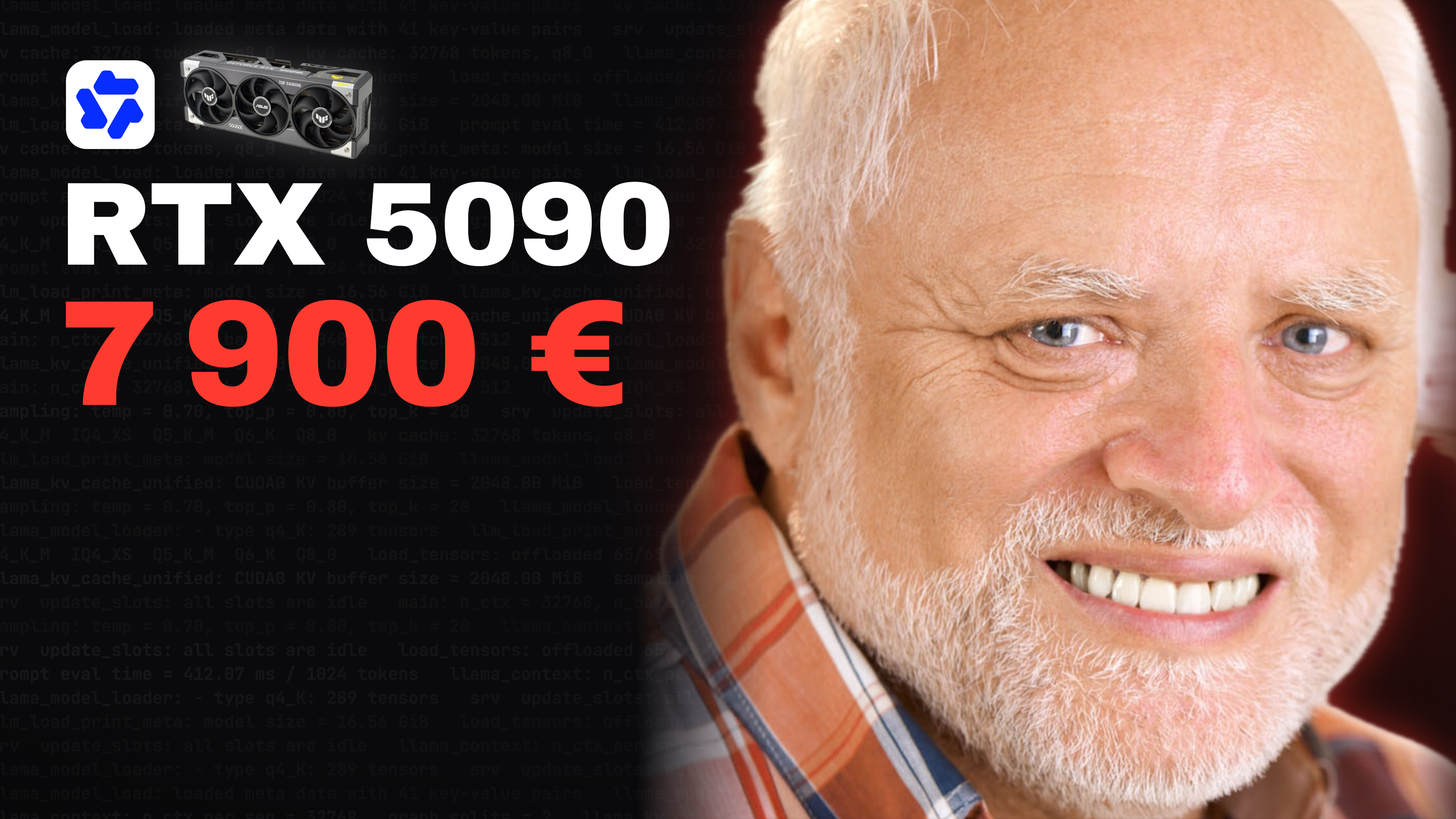
<style>
.page{position:relative;width:1456px;height:819px;background:#0a0a0c}
.page>*{position:absolute;margin:0}
.t1{font:118.3px "ArchivoBlack-Regular";letter-spacing:-0.01em;color:#ffffff}
.t2{font:150.1px "ArchivoBlack-Regular";letter-spacing:-0.01em;color:#ff3b30}
</style>
<div class="page">
<p class="t1" style="left:67px;top:182px;width:603px;height:85px">RTX 5090</p>
<p class="t2" style="left:65px;top:300px;width:558px;height:107px">7 900 €</p>
</div>
